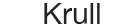
<style>
.page{position:relative;width:140px;height:28px;background:#ffffff}
.page>*{position:absolute;margin:0}
.t1{font:30px "HelveticaNeue";color:#242424}
</style>
<div class="page">
<p class="t1" style="left:44px;top:3px;width:56px;height:21px">Krull</p>
</div>
